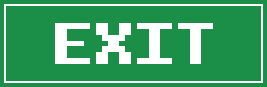
<style>
.page{position:relative;width:267px;height:87px;background:#1b8f48}
.page>*{position:absolute;margin:0}
.t1{font:60px "PixelIntv";color:#ffffff}
</style>
<div class="page">
<p class="t1" style="left:55px;top:23px;width:158px;height:41px">EXIT</p>
</div>
